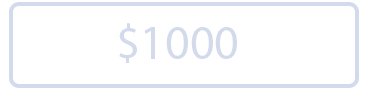
<style>
.page{position:relative;width:367px;height:94px;background:#ffffff}
.page>*{position:absolute;margin:0}
.t1{font:48px "MyriadPro-Regular";color:#d3daeb}
</style>
<div class="page">
<p class="t1" style="left:119px;top:23px;width:118px;height:40px">$1000</p>
</div>
